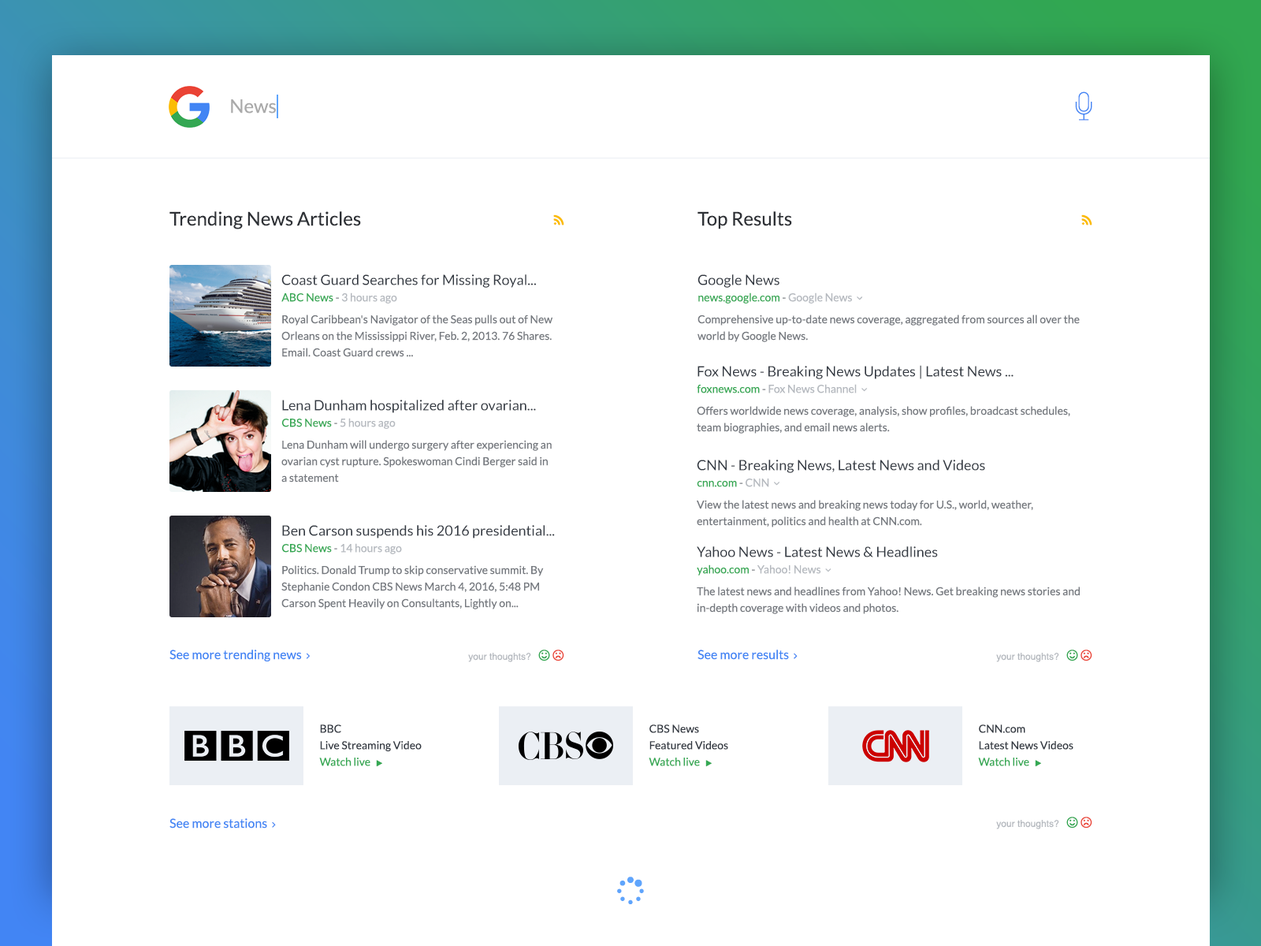
<style>
.page{position:relative;width:1261px;height:946px;background:#ffffff}
.page>*{position:absolute;margin:0}
.t1{font:18.9px "Lato-Regular";color:#aaaaaa}
.t2{font:18.9px "Lato-Regular";color:#2e3136}
.t3{font:14.2px "Lato-Regular";color:#323841}
.t4{font:11px "Lato-Regular";color:#b5b9bf}
.t5{font:11px "Lato-Regular";color:#34a853}
.t6{font:11px "Lato-Regular";color:#75797f}
.t7{font:11px/16.5px "Lato-Regular";color:#75797f}
</style>
<div class="page">
<p class="t1" style="left:231px;top:99px;width:45px;height:14px">News</p>
<p class="t2" style="left:169px;top:211px;width:192px;height:18px">Trending News Articles</p>
<p class="t2" style="left:697px;top:211px;width:95px;height:18px">Top Results</p>
<p class="t3" style="left:281px;top:274px;width:255px;height:14px">Coast Guard Searches for Missing Royal...</p>
<p class="t3" style="left:697px;top:274px;width:82px;height:14px">Google News</p>
<p class="t4" style="left:281px;top:292px;width:116px;height:11px"><span class="t5">ABC News</span><span class="t6"> - </span>3 hours ago</p>
<p class="t7" style="left:281px;top:314px;width:271px;height:43px">Royal Caribbean's Navigator of the Seas pulls out of New <br>Orleans on the Mississippi River, Feb. 2, 2013. 76 Shares. <br>Email. Coast Guard crews ...</p>
<p class="t7" style="left:697px;top:314px;width:383px;height:28px">Comprehensive up-to-date news coverage, aggregated from sources all over the <br>world by Google News.</p>
<p class="t3" style="left:697px;top:365px;width:316px;height:14px">Fox News - Breaking News Updates | Latest News ...</p>
<p class="t3" style="left:282px;top:400px;width:254px;height:13px">​Lena Dunham hospitalized after ovarian...</p>
<p class="t7" style="left:697px;top:406px;width:373px;height:27px">Offers worldwide news coverage, analysis, show profiles, broadcast schedules, <br>team biographies, and email news alerts.</p>
<p class="t4" style="left:281px;top:418px;width:115px;height:11px"><span class="t5">CBS News</span><span class="t6"> - </span>5 hours ago</p>
<p class="t7" style="left:281px;top:440px;width:271px;height:42px">Lena Dunham will undergo surgery after experiencing an <br>ovarian cyst rupture. Spokeswoman Cindi Berger said in <br>a statement</p>
<p class="t3" style="left:697px;top:459px;width:288px;height:14px">CNN - Breaking News, Latest News and Videos</p>
<p class="t7" style="left:697px;top:500px;width:336px;height:27px">View the latest news and breaking news today for U.S., world, weather, <br>entertainment, politics and health at CNN.com.</p>
<p class="t3" style="left:282px;top:525px;width:273px;height:13px">Ben Carson suspends his 2016 presidential...</p>
<p class="t4" style="left:281px;top:543px;width:121px;height:11px"><span class="t5">CBS News</span><span class="t6"> - </span>14 hours ago</p>
<p class="t3" style="left:697px;top:546px;width:241px;height:11px">Yahoo News - Latest News &amp; Headlines</p>
<p class="t7" style="left:281px;top:565px;width:263px;height:44px">Politics. Donald Trump to skip conservative summit. By <br>Stephanie Condon CBS News March 4, 2016, 5:48 PM<br>Carson Spent Heavily on Consultants, Lightly on...</p>
<p class="t7" style="left:697px;top:586px;width:383px;height:28px">The latest news and headlines from Yahoo! News. Get breaking news stories and <br>in-depth coverage with videos and photos.</p>
</div>
